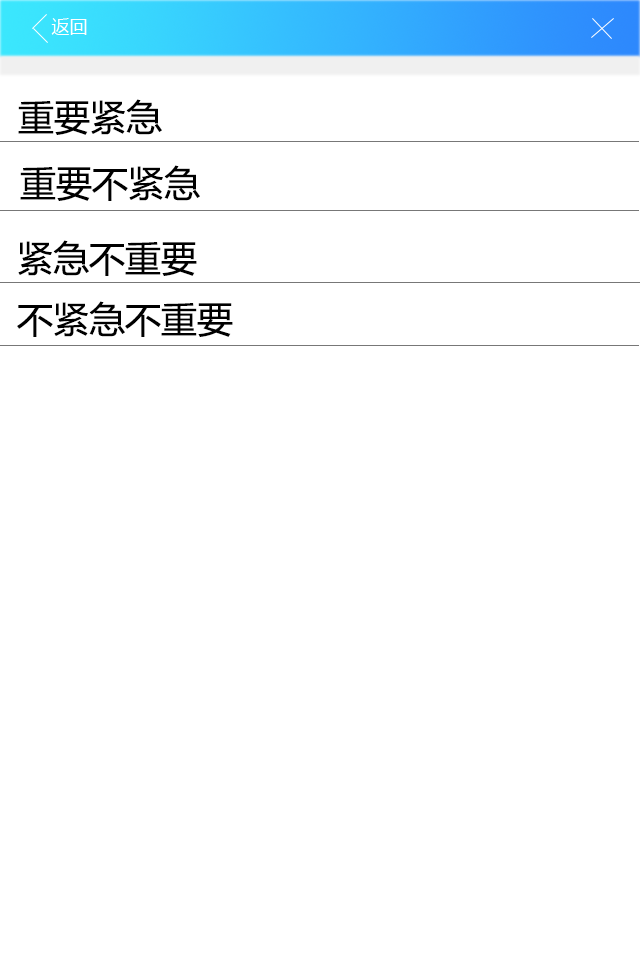
<style>
.page{position:relative;width:640px;height:960px;background:#ffffff}
.page>*{position:absolute;margin:0}
.t1{font:36px "MicrosoftYaHei";color:#000000}
.t2{font:36px "·ÂËÎ";color:#6b6767}
</style>
<div class="page">
<p class="t1" style="left:18px;top:99px;width:144px;height:36px"><span class="t2">    </span>重要紧急</p>
<p class="t1" style="left:20px;top:165px;width:180px;height:36px">重要不紧急</p>
<p class="t1" style="left:18px;top:240px;width:179px;height:36px">紧急不重要</p>
<p class="t1" style="left:17px;top:301px;width:216px;height:36px">不紧急不重要</p>
</div>
